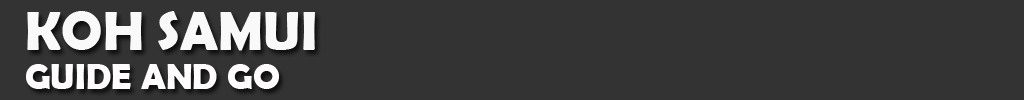
<style>
.page{position:relative;width:1024px;height:100px;background:#333333}
.page>*{position:absolute;margin:0}
.t1{font:55px "BerlinSansFBDemi-Bold";color:#faf9f9}
.t2{font:36px "BerlinSansFBDemi-Bold";color:#fefcfc}
</style>
<div class="page">
<p class="t1" style="left:27px;top:11px;width:288px;height:40px">KOH SAMUI</p>
<p class="t2" style="left:26px;top:64px;width:253px;height:26px">GUIDE AND GO</p>
</div>
